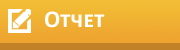
<style>
.page{position:relative;width:180px;height:50px}
.page>*{position:absolute;margin:0}
.t1{font:24px "Calibri-Bold";color:#ffffff;font-variant:small-caps}
</style>
<div class="page">
<p class="t1" style="left:45px;top:11px;width:60px;height:17px">Отчет</p>
</div>
